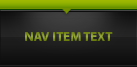
<style>
.page{position:relative;width:137px;height:67px}
.page>*{position:absolute;margin:0}
.t1{font:13px "MyriadPro-Bold";color:#7f9121}
</style>
<div class="page">
<p class="t1" style="left:25px;top:32px;width:88px;height:9px">NAV ITEM TEXT</p>
</div>
